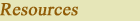
<style>
.page{position:relative;width:140px;height:21px;background:#e6e6b8}
.page>*{position:absolute;margin:0}
.t1{font:18px "TimesNewRomanPSMT";color:#915c07;font-weight:bold;font-style:italic}
</style>
<div class="page">
<p class="t1" style="left:0px;top:3px;width:78px;height:13px">Resources</p>
</div>
